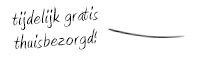
<style>
.page{position:relative;width:200px;height:57px;background:#ffffff}
.page>*{position:absolute;margin:0}
.t1{font:19.7px "Amienne-Regular";letter-spacing:0.05em;color:#000000}
</style>
<div class="page">
<p class="t1" style="left:12px;top:6px;width:87px;height:44px;rotate:-4deg">tijdelijk gratis<br>thuisbezorgd!</p>
</div>
